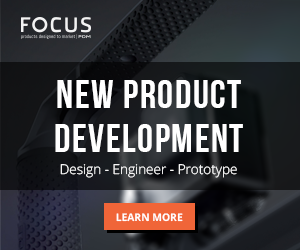
<style>
.page{position:relative;width:300px;height:250px}
.page>*{position:absolute;margin:0}
.t1{font:40px/44.1px "BebasNeueBold";letter-spacing:0.04em;color:#ffffff}
.t2{font:13.6px "OpenSans-Light"}
.t3{font:10.5px "OpenSans-Bold";color:#ffffff}
</style>
<div class="page">
<p class="t1" style="left:55px;top:80px;width:188px;height:72px;text-align:center">new product<br>development</p>
<p class="t2" style="left:60px;top:164px;width:177px;height:14px">Design - Engineer - Prototype</p>
<p class="t3" style="left:116px;top:213px;width:67px;height:9px">LEARN MORE</p>
</div>
